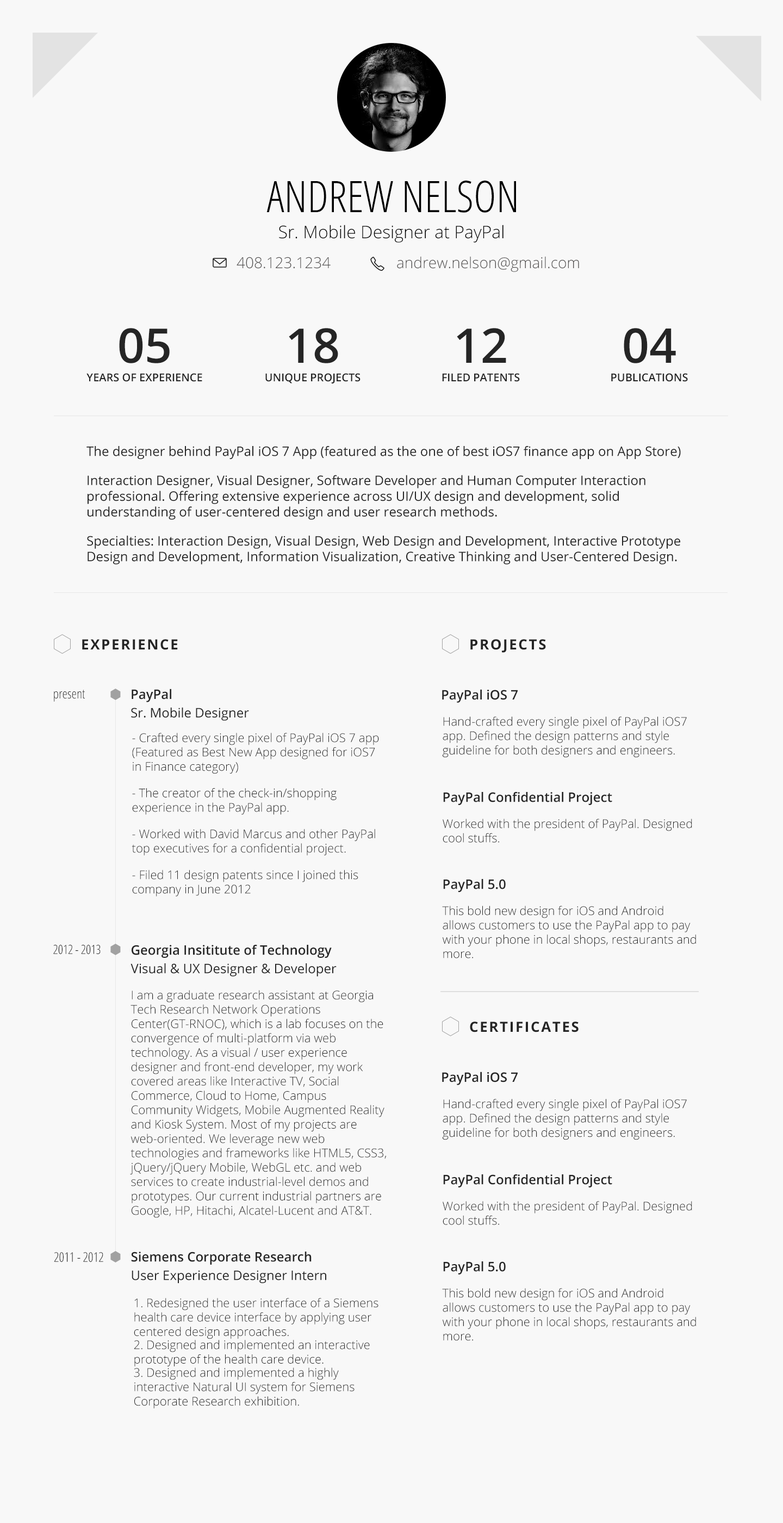
<style>
.page{position:relative;width:783px;height:1523px;background:#f8f8f8}
.page>*{position:absolute;margin:0}
.t1{font:43.5px "OpenSans-CondensedLight";color:#000000}
.t2{font:17.4px "OpenSans-Light";color:#000000}
.t3{font:15.2px "OpenSans-Light";color:#525050}
.t4{font:10.9px/19.6px "OpenSans-Semibold";color:#252525;text-transform:uppercase}
.t5{font:47.9px/19.6px "OpenSans-Semibold";color:#252525}
.t6{font:13.1px "OpenSans";color:#252525}
.t7{font:14.1px "OpenSans-Bold";letter-spacing:0.1em;color:#252525;text-transform:uppercase}
.t8{font:13.1px "OpenSans-CondensedLight";color:#252525}
.t9{font:13.1px/19.6px "OpenSans";color:#252525}
.t10{font:13.1px/19.6px "OpenSans-Semibold";color:#252525}
.t11{font:13.1px "OpenSans-Semibold";color:#252525}
.t12{font:12px "OpenSans-Light";color:#252525}
.t13{font:12.5px "OpenSans-CondensedLight";color:#252525}
</style>
<div class="page">
<p class="t1" style="left:266px;top:181px;width:250px;height:32px">ANDREW NELSON</p>
<p class="t2" style="left:279px;top:225px;width:225px;height:18px">Sr. Mobile Designer at PayPal</p>
<p class="t3" style="left:237px;top:257px;width:94px;height:12px">408.123.1234</p>
<p class="t3" style="left:397px;top:256px;width:182px;height:16px">andrew.nelson@gmail.com</p>
<p class="t4" style="left:86px;top:328px;width:116px;height:54px;text-align:center"><span class="t5">05<br></span>years of experience</p>
<p class="t4" style="left:265px;top:328px;width:96px;height:55px;text-align:center"><span class="t5">18<br></span>Unique projects</p>
<p class="t4" style="left:442px;top:328px;width:78px;height:54px;text-align:center"><span class="t5">12<br></span>filed patents</p>
<p class="t4" style="left:611px;top:328px;width:77px;height:54px;text-align:center"><span class="t5">04<br></span>publications</p>
<p class="t6" style="left:86px;top:446px;width:595px;height:118px">The designer behind PayPal iOS 7 App (featured as the one of best iOS7 finance app on App Store)<br><br>Interaction Designer, Visual Designer, Software Developer and Human Computer Interaction professional. Offering extensive experience across UI/UX design and development, solid understanding of user-centered design and user research methods.<br><br>Specialties: Interaction Design, Visual Design, Web Design and Development, Interactive Prototype Design and Development, Information Visualization, Creative Thinking and User-Centered Design.</p>
<p class="t7" style="left:82px;top:639px;width:96px;height:11px">Experience</p>
<p class="t7" style="left:470px;top:639px;width:76px;height:14px">Projects</p>
<p class="t8" style="left:54px;top:690px;width:31px;height:12px">present</p>
<p class="t9" style="left:131px;top:688px;width:118px;height:33px"><span class="t10">PayPal</span><br>Sr. Mobile Designer</p>
<p class="t11" style="left:442px;top:689px;width:76px;height:14px">PayPal iOS 7</p>
<p class="t12" style="left:443px;top:716px;width:244px;height:42px">Hand-crafted every single pixel of PayPal iOS7 app. Defined the design patterns and style guideline for both designers and engineers.</p>
<p class="t12" style="left:132px;top:733px;width:247px;height:163px">- Crafted every single pixel of PayPal iOS 7 app (Featured as Best New App designed for iOS7 in Finance category)<br><br>- The creator of the check-in/shopping experience in the PayPal app.<br><br>- Worked with David Marcus and other PayPal top executives for a confidential project.<br><br>- Filed 11 design patents since I joined this company in June 2012</p>
<p class="t11" style="left:443px;top:792px;width:169px;height:13px">PayPal Confidential Project</p>
<p class="t12" style="left:443px;top:818px;width:249px;height:24px">Worked with the president of PayPal. Designed cool stuffs.</p>
<p class="t11" style="left:443px;top:879px;width:63px;height:13px">PayPal 5.0</p>
<p class="t12" style="left:442px;top:905px;width:254px;height:53px">This bold new design for iOS and Android allows customers to use the PayPal app to pay with your phone in local shops, restaurants and more.</p>
<p class="t13" style="left:53px;top:945px;width:48px;height:9px">2012 - 2013</p>
<p class="t10" style="left:131px;top:945px;width:206px;height:31px">Georgia Insititute of Technology<span class="t9"><br>Visual &amp; UX Designer &amp; Developer</span></p>
<p class="t12" style="left:130px;top:990px;width:256px;height:228px">I am a graduate research assistant at Georgia Tech Research Network Operations Center(GT-RNOC), which is a lab focuses on the convergence of multi-platform via web technology. As a visual / user experience designer and front-end developer, my work covered areas like Interactive TV, Social Commerce, Cloud to Home, Campus Community Widgets, Mobile Augmented Reality and Kiosk System. Most of my projects are web-oriented. We leverage new web technologies and frameworks like HTML5, CSS3, jQuery/jQuery Mobile, WebGL etc. and web services to create industrial-level demos and prototypes. Our current industrial partners are Google, HP, Hitachi, Alcatel-Lucent and AT&amp;T.</p>
<p class="t7" style="left:470px;top:1021px;width:109px;height:11px">Certificates</p>
<p class="t11" style="left:442px;top:1071px;width:76px;height:14px">PayPal iOS 7</p>
<p class="t12" style="left:443px;top:1099px;width:244px;height:41px">Hand-crafted every single pixel of PayPal iOS7 app. Defined the design patterns and style guideline for both designers and engineers.</p>
<p class="t11" style="left:443px;top:1174px;width:169px;height:13px">PayPal Confidential Project</p>
<p class="t12" style="left:443px;top:1201px;width:249px;height:24px">Worked with the president of PayPal. Designed cool stuffs.</p>
<p class="t8" style="left:54px;top:1252px;width:49px;height:10px">2011 - 2012</p>
<p class="t9" style="left:131px;top:1251px;width:195px;height:32px"><span class="t10">Siemens Corporate Research<br></span>User Experience Designer Intern</p>
<p class="t11" style="left:443px;top:1261px;width:63px;height:13px">PayPal 5.0</p>
<p class="t12" style="left:442px;top:1288px;width:254px;height:53px">This bold new design for iOS and Android allows customers to use the PayPal app to pay with your phone in local shops, restaurants and more.</p>
<p class="t12" style="left:134px;top:1298px;width:245px;height:110px">1. Redesigned the user interface of a Siemens health care device interface by applying user centered design approaches. <br>2. Designed and implemented an interactive prototype of the health care device.<br>3. Designed and implemented a highly interactive Natural UI system for Siemens Corporate Research exhibition.</p>
</div>
